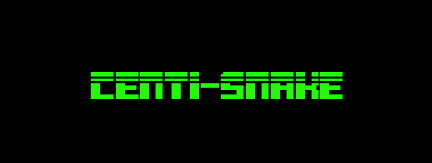
<style>
.page{position:relative;width:432px;height:163px;background:#000000}
.page>*{position:absolute;margin:0}
.t1{font:36px "Runners";color:#1eff00}
</style>
<div class="page">
<p class="t1" style="left:91px;top:72px;width:252px;height:27px">Centi-Snake</p>
</div>
